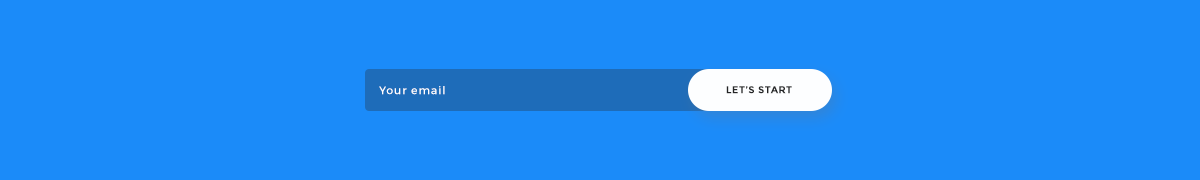
<style>
.page{position:relative;width:1200px;height:180px;background:#1b8bf9}
.page>*{position:absolute;margin:0}
.t1{font:11px "Montserrat-Regular";letter-spacing:0.08em;color:#ffffff}
.t2{font:10px "Montserrat-Bold";letter-spacing:0.04em;color:#242526;text-transform:uppercase}
</style>
<div class="page">
<p class="t1" style="left:379px;top:86px;width:66px;height:9px">Your email</p>
<p class="t2" style="left:726px;top:86px;width:66px;height:8px">Let’s start</p>
</div>
